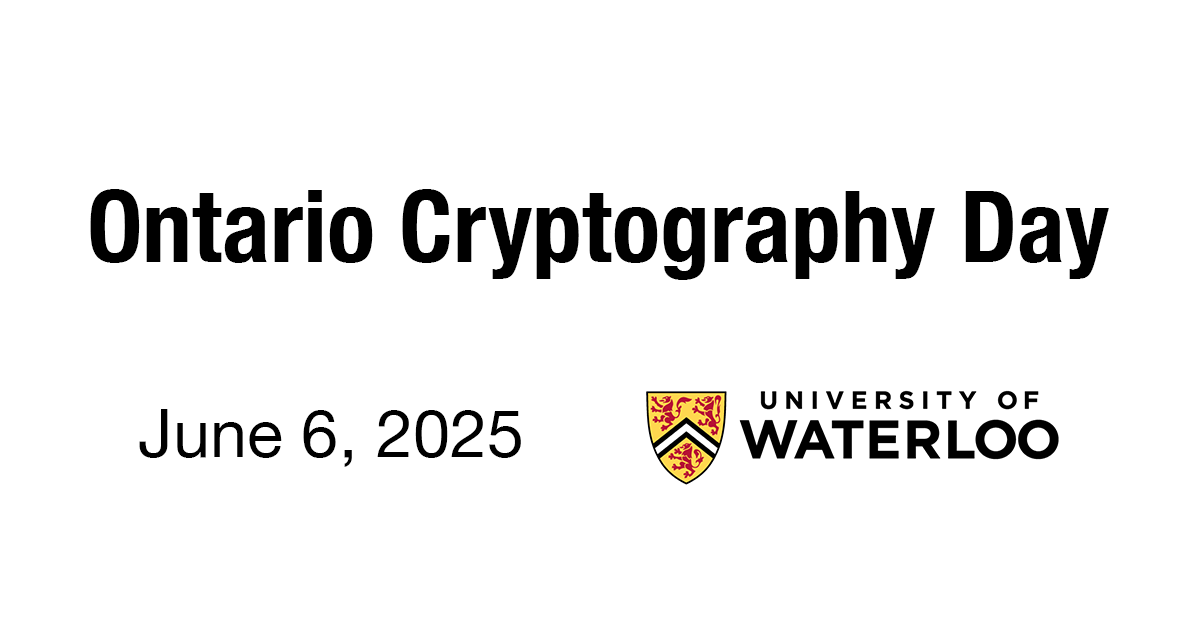
<style>
.page{position:relative;width:1200px;height:630px;background:#ffffff}
.page>*{position:absolute;margin:0}
.t1{font:100px "HelveticaNeue-CondensedBold";color:#000000}
.t2{font:66.7px "HelveticaNeue";color:#000000}
</style>
<div class="page">
<p class="t1" style="left:90px;top:189px;width:1019px;height:91px">Ontario Cryptography Day</p>
<p class="t2" style="left:139px;top:409px;width:382px;height:58px">June 6, 2025</p>
</div>
